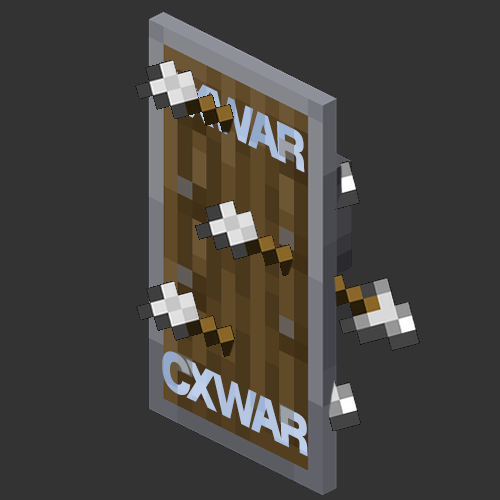
<style>
.page{position:relative;width:500px;height:500px;background:#333333}
.page>*{position:absolute;margin:0}
.t1{font:55.5px "GreaterTheoryRegular";letter-spacing:-0.1em;scale:0.68 1}
.t2{font:55.5px "GreaterTheoryRegular";letter-spacing:-0.1em;color:#b5c7e2;scale:0.68 1}
</style>
<div class="page">
<p class="t1" style="left:159px;top:67px;width:146px;height:106px;rotate:26deg">CXWAR</p>
<p class="t2" style="left:162px;top:351px;width:146px;height:106px;rotate:26deg">CXWAR</p>
</div>
